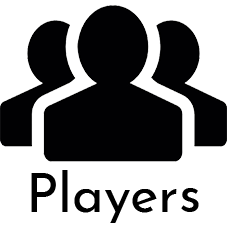
<style>
.page{position:relative;width:227px;height:227px;background:#ffffff}
.page>*{position:absolute;margin:0}
.t1{font:54.4px "JosefinSans-Regular";color:#000000}
</style>
<div class="page">
<p class="t1" style="left:31px;top:170px;width:168px;height:53px">Players</p>
</div>
